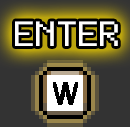
<style>
.page{position:relative;width:130px;height:127px;background:#333333}
.page>*{position:absolute;margin:0}
.t1{font:49px "Silver";color:#ffffff;scale:1.3 1}
</style>
<div class="page">
<p class="t1" style="left:15px;top:21px;width:103px;height:25px">ENTER</p>
</div>
